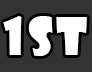
<style>
.page{position:relative;width:92px;height:72px;background:#333333}
.page>*{position:absolute;margin:0}
.t1{font:50px "ShowcardGothic-Reg";letter-spacing:0.075em;color:#ffffff}
</style>
<div class="page">
<p class="t1" style="left:3px;top:16px;width:84px;height:40px">1st</p>
</div>
